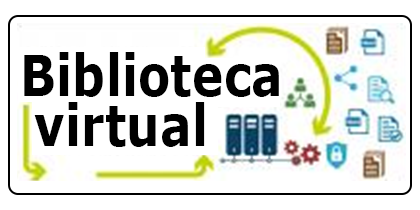
<style>
.page{position:relative;width:420px;height:210px;background:#ffffff}
.page>*{position:absolute;margin:0}
.t1{font:56.8px/50px "Verdana-Bold";color:#000000;scale:0.83 1}
</style>
<div class="page">
<p class="t1" style="left:24px;top:52px;width:255px;height:95px">Biblioteca<br> virtual</p>
</div>
